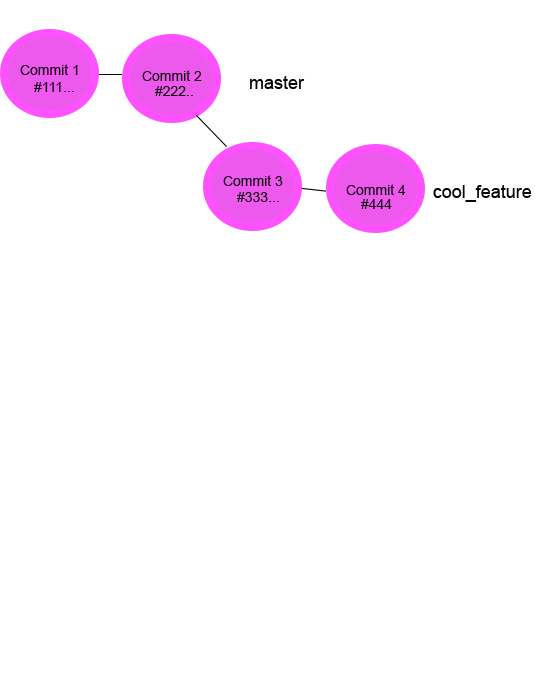
<style>
.page{position:relative;width:535px;height:673px;background:#ffffff}
.page>*{position:absolute;margin:0}
.t1{font:14px "ArialMT";color:#070707}
.t2{font:18px "ArialMT";color:#070707}
.t3{font:14px/60px "ArialMT";color:#070707}
</style>
<div class="page">
<p class="t1" style="left:20px;top:64px;width:58px;height:11px">Commit 1</p>
<p class="t1" style="left:142px;top:70px;width:60px;height:11px">Commit 2</p>
<p class="t2" style="left:250px;top:76px;width:55px;height:13px">master</p>
<p class="t1" style="left:34px;top:82px;width:40px;height:10px">#111...</p>
<p class="t1" style="left:155px;top:86px;width:38px;height:10px">#222..</p>
<p class="t3" style="left:223px;top:175px;width:60px;height:11px">Commit 3<br>#</p>
<p class="t1" style="left:346px;top:184px;width:60px;height:11px">Commit 4</p>
<p class="t2" style="left:433px;top:185px;width:99px;height:17px">cool_feature</p>
<p class="t1" style="left:237px;top:192px;width:42px;height:10px">#333...</p>
<p class="t1" style="left:361px;top:199px;width:31px;height:10px">#444</p>
</div>
